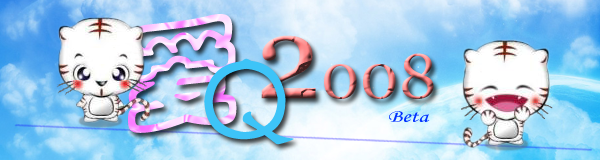
<style>
.page{position:relative;width:600px;height:160px}
.page>*{position:absolute;margin:0}
.t1{font:113.3px "STCaiyun";font-weight:bold}
.t2{font:63px "Georgia"}
.t3{font:115.4px "Georgia"}
.t4{font:138.8px "FZSTK--GBK1-0";color:#3dc4f8}
.t5{font:18.3px "MonotypeCorsiva";color:#0030ff;scale:1.34 1}
</style>
<div class="page">
<p class="t1" style="left:128px;top:14px;width:109px;height:119px;rotate:-6deg">爱</p>
<p class="t2" style="left:261px;top:35px;width:173px;height:64px"><span class="t3">2</span>008</p>
<p class="t4" style="left:204px;top:58px;width:90px;height:87px">Q</p>
<p class="t5" style="left:389px;top:111px;width:41px;height:11px">Beta</p>
</div>
